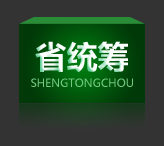
<style>
.page{position:relative;width:164px;height:146px;background:#333333}
.page>*{position:absolute;margin:0}
.t1{font:31.1px "MicrosoftYaHei-Bold";color:#ffffff}
.t2{font:11px "MicrosoftYaHei";color:#73c980}
</style>
<div class="page">
<p class="t1" style="left:35px;top:41px;width:93px;height:32px">省统筹</p>
<p class="t2" style="left:31px;top:78px;width:102px;height:9px">SHENGTONGCHOU</p>
</div>
